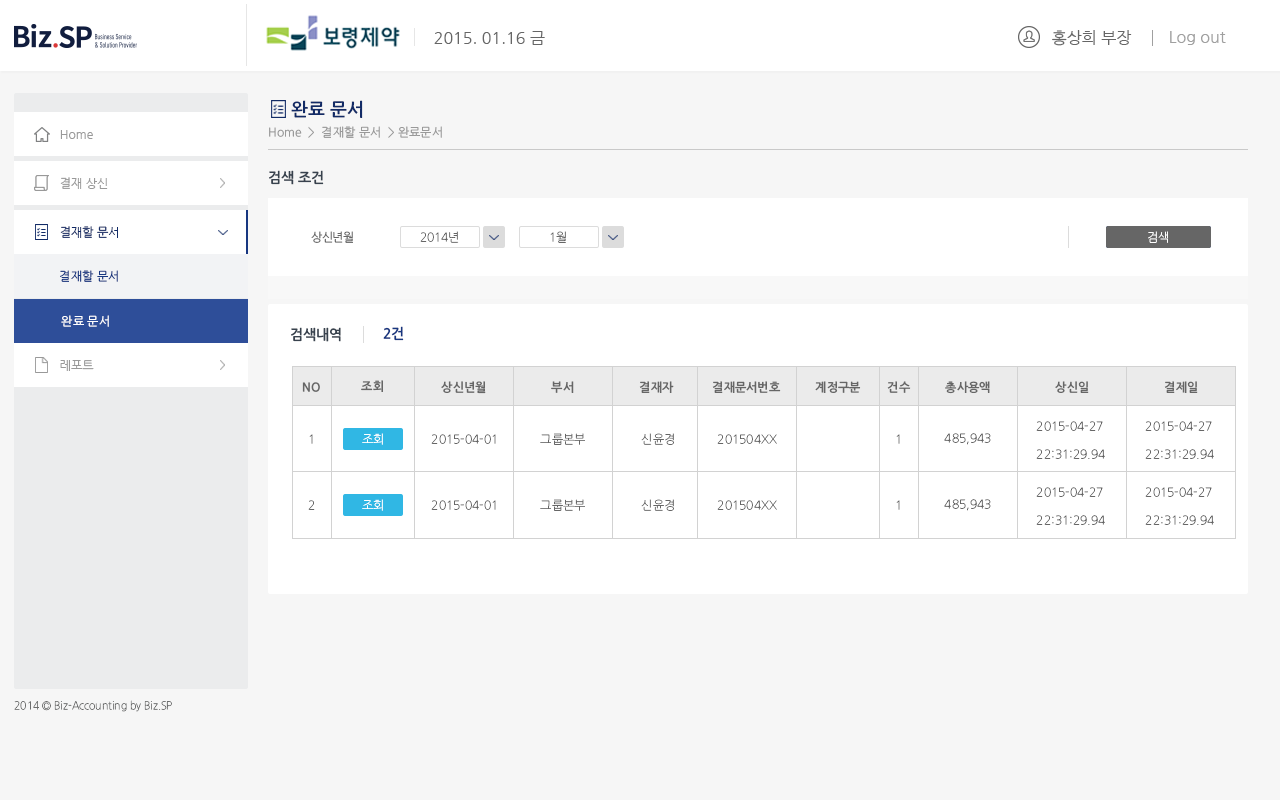
<style>
.page{position:relative;width:1280px;height:800px;background:#ffffff}
.page>*{position:absolute;margin:0}
.t1{font:16px "NanumGothic";color:#666666}
.t2{font:16px "NanumGothic";color:#a0a0a0}
.t3{font:18px "NanumGothicOTFBold";color:#122b66}
.t4{font:12px "NanumGothicOTF";color:#999999}
.t5{font:12px "NanumGothic";color:#999999}
.t6{font:14px "NanumGothicOTFBold";color:#38424e}
.t7{font:12px "NanumGothic";color:#122b66}
.t8{font:12px "NanumGothicOTF";letter-spacing:-0.025em;color:#666666}
.t9{font:12px "NanumGothicOTFLight";letter-spacing:-0.025em;color:#666666}
.t10{font:12px "NanumGothicOTFLight";letter-spacing:-0.025em;color:#ffffff}
.t11{font:12px "NanumGothicOTF";color:#173680}
.t12{font:12px "NanumGothicOTF";color:#ffffff}
.t13{font:14px "NanumGothicOTFBold";color:#173680}
.t14{font:12px "NanumGothicOTFBold";color:#666666}
.t15{font:12px/28.1px "NanumGothicOTFLight";color:#666666}
.t16{font:12px "NanumGothicOTFLight";color:#666666}
.t17{font:11px "NanumGothicOTFLight";color:#6c6d6d;scale:0.94 1}
</style>
<div class="page">
<p class="t1" style="left:1052px;top:30px;width:80px;height:16px">홍상희 부장</p>
<p class="t1" style="left:434px;top:31px;width:111px;height:14px">2015. 01.16 금</p>
<p class="t2" style="left:1170px;top:31px;width:56px;height:14px">Log out</p>
<p class="t3" style="left:291px;top:100px;width:72px;height:18px">완료 문서</p>
<p class="t4" style="left:269px;top:126px;width:173px;height:12px">Home  &gt;  결재할 문서  &gt; 완료문서</p>
<p class="t5" style="left:60px;top:130px;width:33px;height:9px">Home</p>
<p class="t6" style="left:269px;top:170px;width:55px;height:15px">검색 조건</p>
<p class="t5" style="left:60px;top:177px;width:48px;height:12px">결제 상신</p>
<p class="t5" style="left:60px;top:177px;width:48px;height:12px">결재 상신</p>
<p class="t7" style="left:60px;top:226px;width:58px;height:12px">결재할 문서</p>
<p class="t8" style="left:311px;top:231px;width:42px;height:12px">상신년월</p>
<p class="t9" style="left:420px;top:231px;width:39px;height:12px">2014년</p>
<p class="t9" style="left:550px;top:231px;width:16px;height:12px">1월</p>
<p class="t10" style="left:1148px;top:231px;width:20px;height:12px">검색</p>
<p class="t10" style="left:1148px;top:231px;width:20px;height:12px">검색</p>
<p class="t11" style="left:60px;top:270px;width:58px;height:12px">결재할 문서</p>
<p class="t12" style="left:61px;top:315px;width:48px;height:12px">완료 문서</p>
<p class="t6" style="left:291px;top:327px;width:50px;height:15px">검색내역</p>
<p class="t13" style="left:383px;top:326px;width:21px;height:15px">2건</p>
<p class="t5" style="left:60px;top:360px;width:34px;height:11px">레포트</p>
<p class="t5" style="left:60px;top:360px;width:34px;height:11px">레포트</p>
<p class="t14" style="left:302px;top:382px;width:18px;height:10px">NO</p>
<p class="t14" style="left:361px;top:380px;width:22px;height:12px">조회</p>
<p class="t14" style="left:441px;top:381px;width:45px;height:13px">상신년월</p>
<p class="t14" style="left:551px;top:381px;width:23px;height:12px">부서</p>
<p class="t14" style="left:639px;top:381px;width:35px;height:12px">결재자</p>
<p class="t14" style="left:712px;top:381px;width:69px;height:12px">결재문서번호</p>
<p class="t14" style="left:815px;top:381px;width:46px;height:12px">계정구분</p>
<p class="t14" style="left:887px;top:381px;width:24px;height:12px">건수</p>
<p class="t14" style="left:945px;top:381px;width:45px;height:13px">총사용액</p>
<p class="t14" style="left:1055px;top:381px;width:34px;height:12px">상신일</p>
<p class="t14" style="left:1164px;top:381px;width:34px;height:12px">결제일</p>
<p class="t15" style="left:1036px;top:421px;width:69px;height:38px">2015-04-27<br>22:31:29.94</p>
<p class="t15" style="left:1145px;top:421px;width:69px;height:38px">2015-04-27<br>22:31:29.94</p>
<p class="t16" style="left:309px;top:434px;width:4px;height:10px">1</p>
<p class="t10" style="left:362px;top:433px;width:21px;height:12px">조회</p>
<p class="t16" style="left:431px;top:434px;width:65px;height:10px">2015-04-01</p>
<p class="t16" style="left:431px;top:434px;width:65px;height:10px">2015-04-01</p>
<p class="t16" style="left:540px;top:433px;width:45px;height:12px">그룹본부</p>
<p class="t16" style="left:641px;top:433px;width:33px;height:12px">신윤경</p>
<p class="t16" style="left:717px;top:434px;width:60px;height:10px">201504XX</p>
<p class="t16" style="left:896px;top:434px;width:4px;height:10px">1</p>
<p class="t16" style="left:944px;top:433px;width:47px;height:12px">485,943</p>
<p class="t15" style="left:1036px;top:487px;width:69px;height:38px">2015-04-27<br>22:31:29.94</p>
<p class="t15" style="left:1145px;top:487px;width:69px;height:38px">2015-04-27<br>22:31:29.94</p>
<p class="t16" style="left:308px;top:500px;width:7px;height:10px">2</p>
<p class="t10" style="left:362px;top:499px;width:21px;height:12px">조회</p>
<p class="t16" style="left:431px;top:500px;width:65px;height:10px">2015-04-01</p>
<p class="t16" style="left:431px;top:500px;width:65px;height:10px">2015-04-01</p>
<p class="t16" style="left:540px;top:499px;width:45px;height:12px">그룹본부</p>
<p class="t16" style="left:641px;top:499px;width:33px;height:12px">신윤경</p>
<p class="t16" style="left:717px;top:500px;width:60px;height:10px">201504XX</p>
<p class="t16" style="left:896px;top:500px;width:4px;height:10px">1</p>
<p class="t16" style="left:944px;top:499px;width:47px;height:12px">485,943</p>
<p class="t17" style="left:14px;top:700px;width:158px;height:12px">2014 © Biz-Accounting by Biz.SP</p>
</div>
